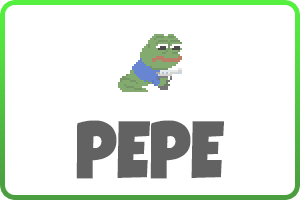
<style>
.page{position:relative;width:300px;height:200px;background:#ffffff}
.page>*{position:absolute;margin:0}
.t1{font:80.5px "LuckiestGuy-Regular";letter-spacing:-0.01em;color:#626262;text-transform:uppercase;scale:0.87 1}
</style>
<div class="page">
<p class="t1" style="left:76px;top:120px;width:148px;height:59px">pepe</p>
</div>
